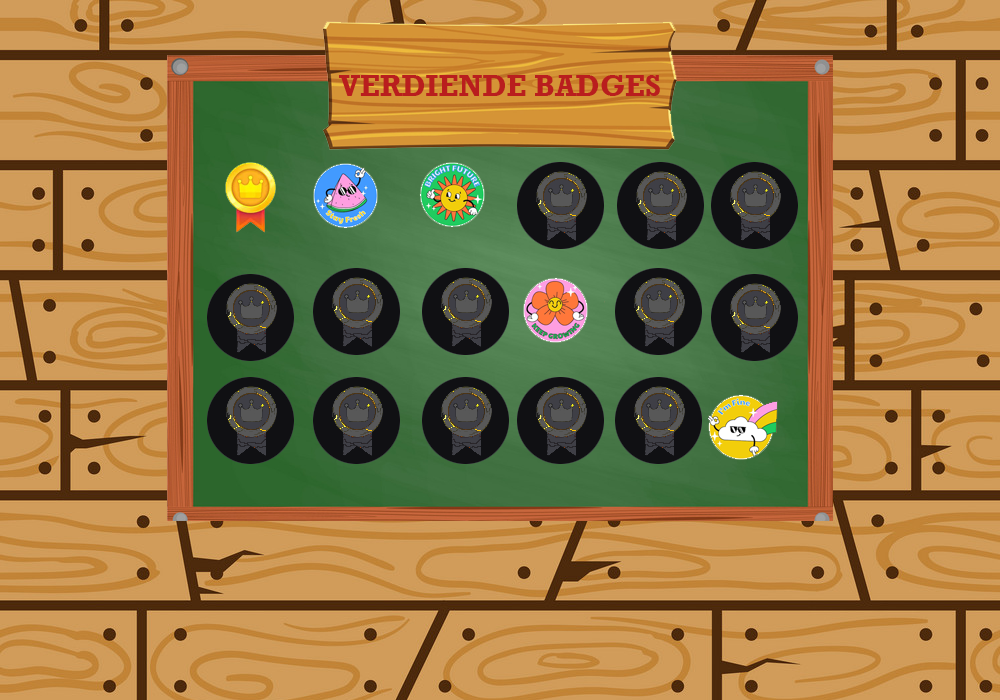
<style>
.page{position:relative;width:1000px;height:700px}
.page>*{position:absolute;margin:0}
.t1{font:30px "Rockwell-Bold";color:#b91e1e}
</style>
<div class="page">
<p class="t1" style="left:339px;top:75px;width:321px;height:21px">VERDIENDE BADGES</p>
</div>
